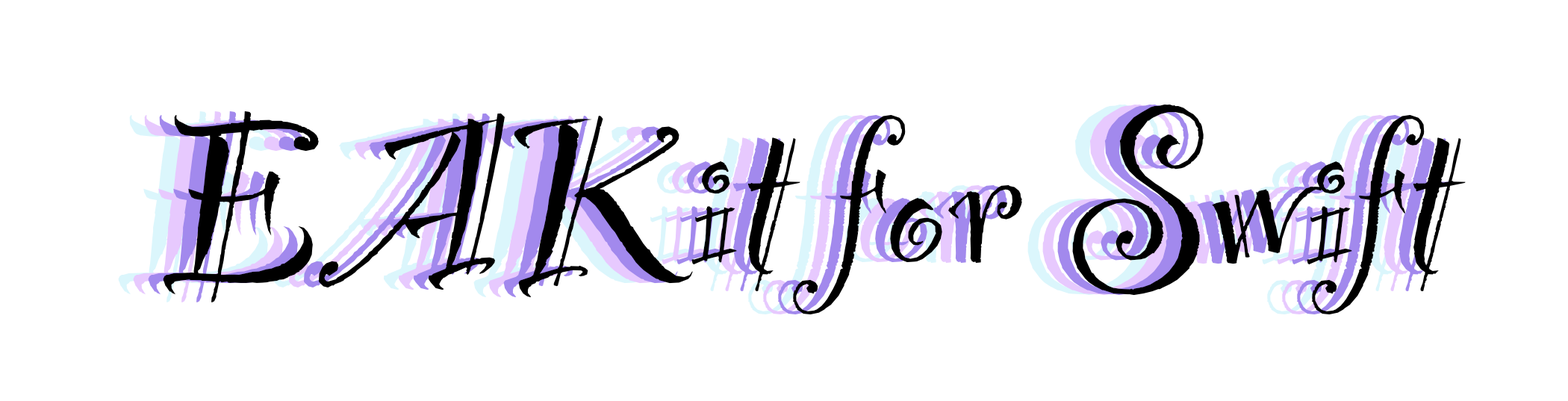
<style>
.page{position:relative;width:1568px;height:401px;background:#ffffff}
.page>*{position:absolute;margin:0}
.t1{font:261.3px "PartyLetPlain";color:#a289ed}
.t2{font:261.3px "PartyLetPlain";color:#000000}
</style>
<div class="page">
<p class="t1" style="left:148px;top:105px;width:1303px;height:209px">EAKit for Swift</p>
<p class="t2" style="left:163px;top:105px;width:1303px;height:209px">EAKit for Swift</p>
</div>
